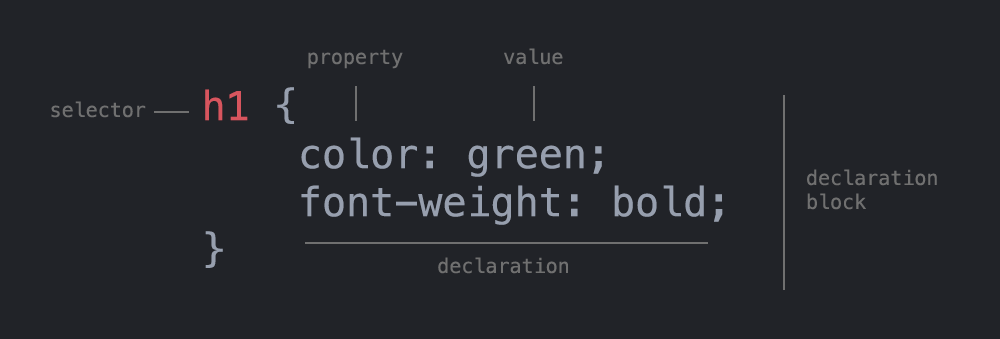
<style>
.page{position:relative;width:1000px;height:339px;background:#212328}
.page>*{position:absolute;margin:0}
.t1{font:20px "Menlo-Regular";color:#707070}
.t2{font:40px "Menlo-Regular";color:#979fae}
.t3{font:40px "Menlo-Regular";color:#d7555e}
</style>
<div class="page">
<p class="t1" style="left:308px;top:49px;width:95px;height:20px">property</p>
<p class="t1" style="left:504px;top:48px;width:59px;height:17px">value</p>
<p class="t2" style="left:205px;top:87px;width:518px;height:181px"><span class="t3">h1</span> { <br>    color: green;<br>    font-weight: bold;<br>}</p>
<p class="t1" style="left:51px;top:101px;width:95px;height:17px">selector</p>
<p class="t1" style="left:807px;top:169px;width:130px;height:41px">declaration block</p>
<p class="t1" style="left:438px;top:257px;width:130px;height:17px">declaration</p>
</div>
